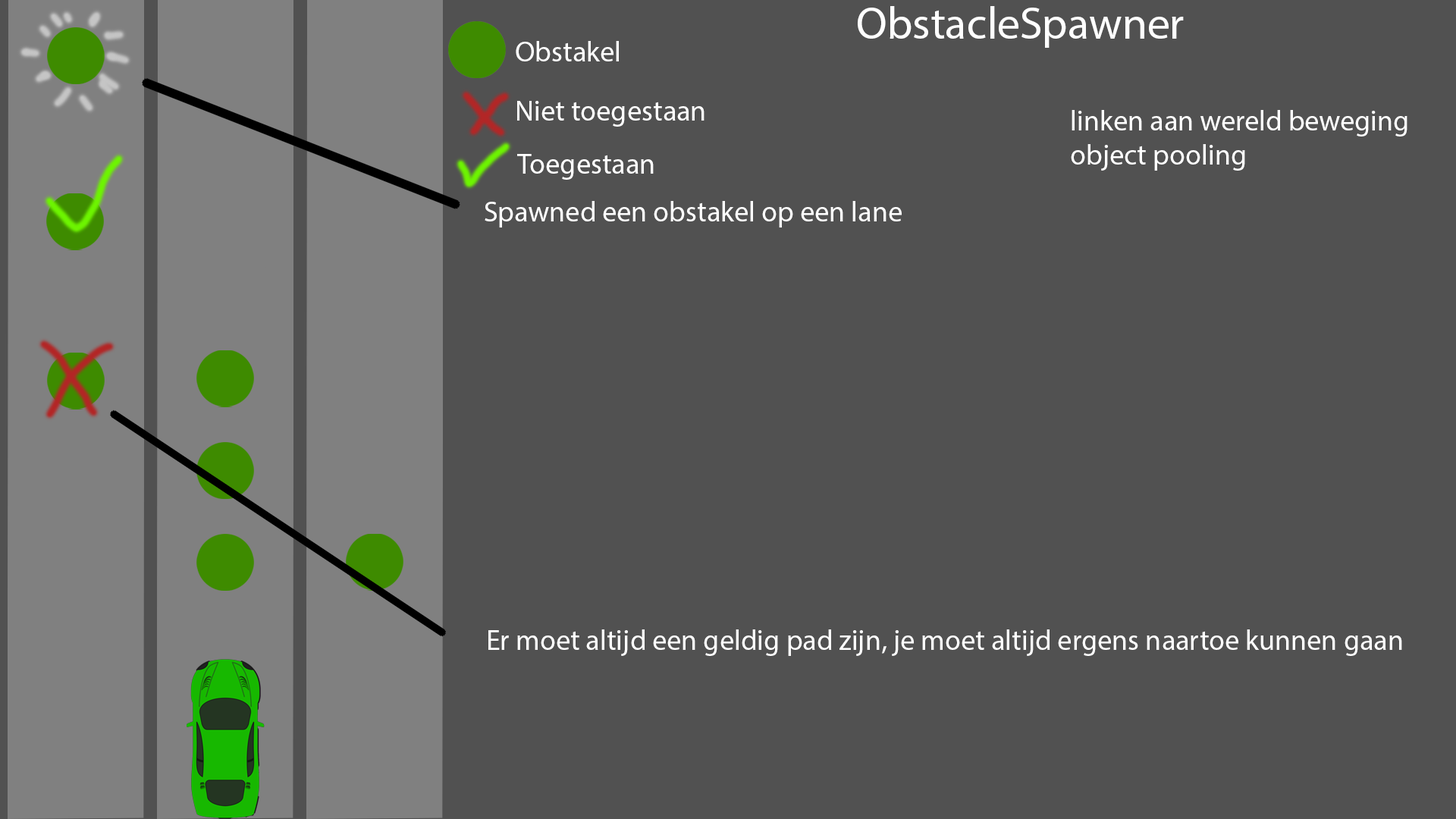
<style>
.page{position:relative;width:1456px;height:819px;background:#515151}
.page>*{position:absolute;margin:0}
.t1{font:44.9px "MyriadPro-Regular";color:#ffffff}
.t2{font:28.9px "MyriadPro-Regular";color:#ffffff}
</style>
<div class="page">
<p class="t1" style="left:858px;top:6px;width:326px;height:42px">ObstacleSpawner</p>
<p class="t2" style="left:516px;top:41px;width:103px;height:20px">Obstakel</p>
<p class="t2" style="left:517px;top:101px;width:187px;height:26px">Niet toegestaan</p>
<p class="t2" style="left:1071px;top:110px;width:336px;height:61px">linken aan wereld beweging<br>object pooling</p>
<p class="t2" style="left:517px;top:154px;width:137px;height:26px">Toegestaan</p>
<p class="t2" style="left:485px;top:201px;width:417px;height:26px">Spawned een obstakel op een lane</p>
<p class="t2" style="left:488px;top:629px;width:914px;height:27px">Er moet altijd een geldig pad zijn, je moet altijd ergens naartoe kunnen gaan</p>
</div>
